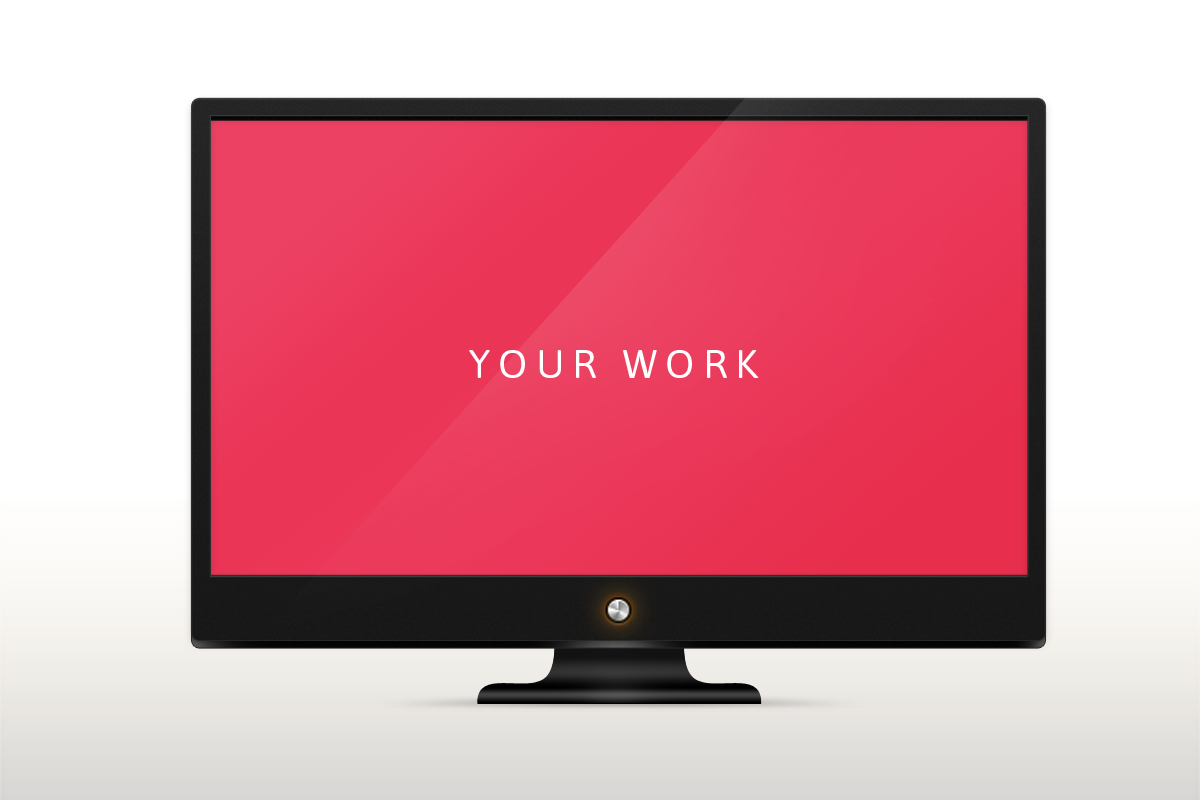
<style>
.page{position:relative;width:1200px;height:800px;background:#ffffff}
.page>*{position:absolute;margin:0}
.t1{font:40px "Asap-Regular";letter-spacing:0.2em;color:#ffffff;text-transform:uppercase}
</style>
<div class="page">
<p class="t1" style="left:469px;top:350px;width:290px;height:28px">Your work</p>
</div>
